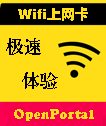
<style>
.page{position:relative;width:106px;height:126px;background:#ffde17}
.page>*{position:absolute;margin:0}
.t1{font:14px "FZCCHJW--GB1-0";color:#ffde17}
.t2{font:18px "FZXBSJW--GB1-0";color:#000000}
.t3{font:14px "CooperBlack";color:#ffde17}
</style>
<div class="page">
<p class="t1" style="left:18px;top:7px;width:70px;height:14px">Wifi上网卡</p>
<p class="t2" style="left:6px;top:38px;width:35px;height:17px">极速</p>
<p class="t2" style="left:22px;top:72px;width:36px;height:17px">体验</p>
<p class="t3" style="left:14px;top:109px;width:80px;height:12px">OpenPortal</p>
</div>
